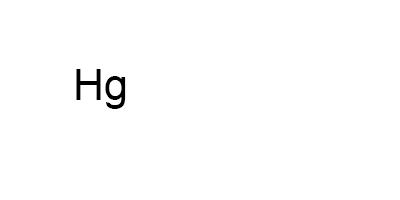
<style>
.page{position:relative;width:400px;height:200px;background:#ffffff}
.page>*{position:absolute;margin:0}
.t1{font:43.2px "ArialMT";color:#000000}
</style>
<div class="page">
<p class="t1" style="left:76px;top:69px;width:50px;height:40px">Hg</p>
</div>
